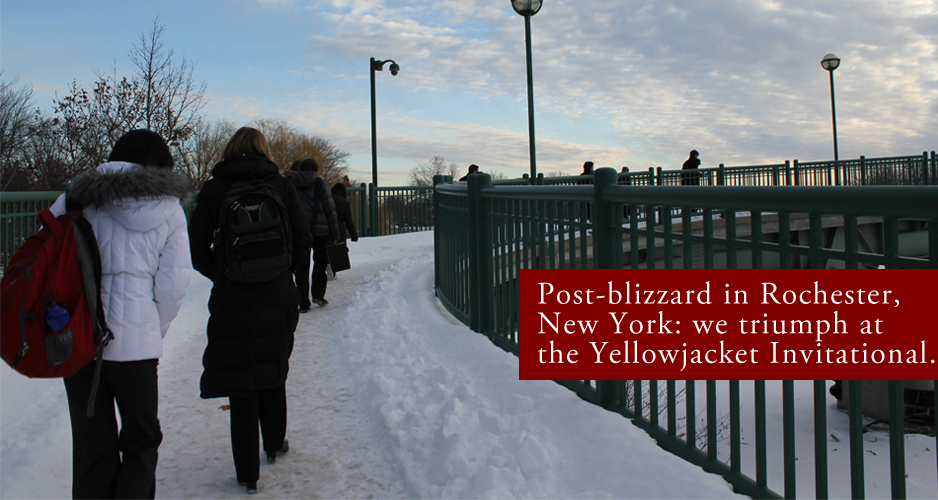
<style>
.page{position:relative;width:938px;height:500px}
.page>*{position:absolute;margin:0}
.t1{font:31.6px/29.6px "AGaramondPro-Regular";letter-spacing:0.046em;color:#ffffff}
</style>
<div class="page">
<p class="t1" style="left:537px;top:281px;width:398px;height:91px">Post-blizzard in Rochester,<br>New York: we triumph at<br>the Yellowjacket Invitational.</p>
</div>
